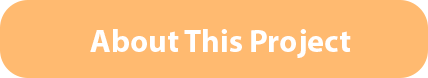
<style>
.page{position:relative;width:428px;height:78px;background:#ffba70}
.page>*{position:absolute;margin:0}
.t1{font:32px "MyriadPro-Bold";color:#ffffff}
</style>
<div class="page">
<p class="t1" style="left:90px;top:29px;width:261px;height:29px">About This Project</p>
</div>
